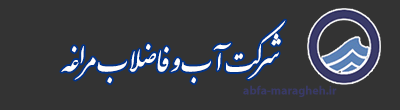
<style>
.page{position:relative;width:400px;height:110px;background:#333333}
.page>*{position:absolute;margin:0}
.t1{font:48px "IranNastaliq";color:#fefefe}
.t2{font:12px "MyriadPro-Bold";color:#393a67}
</style>
<div class="page">
<p class="t1" style="left:61px;top:20px;width:225px;height:64px">شرکت آب و فاضلاب مراغه</p>
<p class="t2" style="left:243px;top:85px;width:94px;height:12px">abfa-maragheh.ir</p>
</div>
